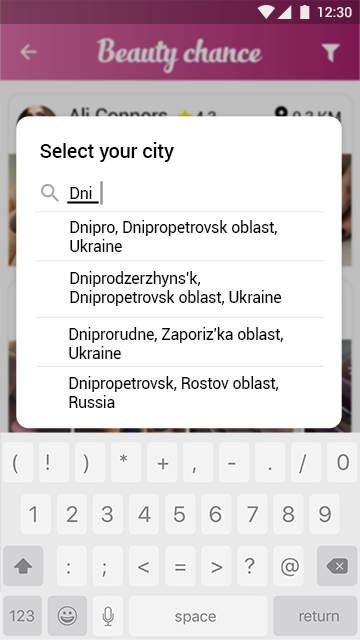
<style>
.page{position:relative;width:360px;height:640px;background:#ffffff}
.page>*{position:absolute;margin:0}
.t1{font:14px "Roboto-Medium";color:#ffffff}
.t2{font:20px "Roboto-Medium";letter-spacing:-0.005em;color:#000000}
.t3{font:16px "Roboto-Regular";letter-spacing:-0.005em;color:#000000}
</style>
<div class="page">
<p class="t1" style="left:318px;top:7px;width:34px;height:11px">12:30</p>
<p class="t2" style="left:40px;top:142px;width:134px;height:20px">Select your city</p>
<p class="t3" style="left:70px;top:186px;width:22px;height:13px">Dni</p>
<p class="t3" style="left:70px;top:220px;width:207px;height:32px">Dnipro, Dnipropetrovsk oblast, <br>Ukraine</p>
<p class="t3" style="left:70px;top:271px;width:212px;height:35px">Dniprodzerzhyns’k, <br>Dnipropetrovsk oblast, Ukraine</p>
<p class="t3" style="left:69px;top:327px;width:214px;height:32px">Dniprorudne, Zaporiz’ka oblast, <br>Ukraine</p>
<p class="t3" style="left:69px;top:376px;width:210px;height:32px">Dnipropetrovsk, Rostov oblast, <br>Russia</p>
</div>
